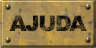
<style>
.page{position:relative;width:96px;height:48px}
.page>*{position:absolute;margin:0}
.t1{font:21.3px "Arial-Black";letter-spacing:-0.055em;text-transform:uppercase}
</style>
<div class="page">
<p class="t1" style="left:9px;top:15px;width:78px;height:17px">ajuda</p>
</div>
